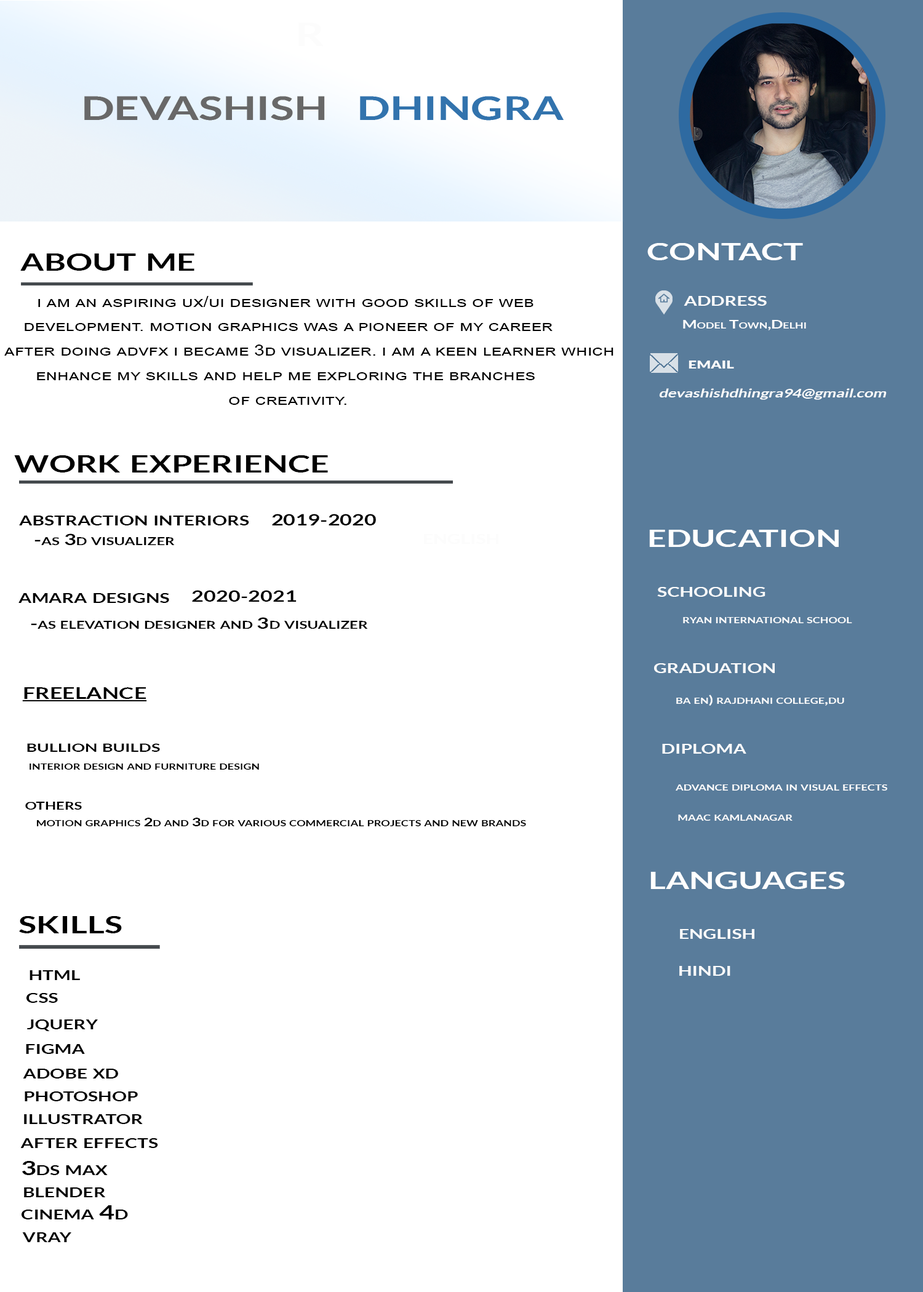
<style>
.page{position:relative;width:923px;height:1292px;background:#ffffff}
.page>*{position:absolute;margin:0}
.t1{font:34.1px "Lato-Bold";color:#ffffff;font-variant:small-caps;scale:1.39 1}
.t2{font:34.1px "Lato-Bold";color:#000000;font-variant:small-caps;scale:1.39 1}
.t3{font:19px "Lato-Bold";color:#fcfcfc;font-variant:small-caps;scale:1.39 1}
.t4{font:11.4px "Lato-Bold";color:#fcfcfc;font-variant:small-caps;scale:1.39 1}
.t5{font:15.2px "Lato-Black";color:#fcfcfc;font-variant:small-caps;scale:1.39 1}
.t6{font:11.4px "Lato-Bold";color:#fcfcfc;font-style:italic;scale:1.39 1}
.t7{font:19px "Lato-Bold";color:#000000;font-variant:small-caps;scale:1.39 1}
.t8{font:15.2px "Lato-Bold";color:#000000;font-variant:small-caps;scale:1.39 1}
.t9{font:22.8px "Lato-Bold";color:#000000;font-variant:small-caps;text-decoration:underline;scale:1.39 1}
.t10{font:17.1px "Lato-Bold";color:#000000;font-variant:small-caps;scale:1.39 1}
.t11{font:11.4px "Lato-Bold";color:#000000;font-variant:small-caps;scale:1.39 1}
</style>
<div class="page">
<p class="t1" style="left:647px;top:243px;width:156px;height:17px">contact</p>
<p class="t2" style="left:20px;top:253px;width:174px;height:18px">about me</p>
<p class="t3" style="left:684px;top:296px;width:83px;height:10px">address</p>
<p class="t4" style="left:683px;top:320px;width:123px;height:10px">Model Town,Delhi</p>
<p class="t5" style="left:688px;top:361px;width:46px;height:8px">email</p>
<p class="t6" style="left:659px;top:388px;width:228px;height:12px">devashishdhingra94@gmail.com</p>
<p class="t2" style="left:14px;top:455px;width:314px;height:18px">work experience</p>
<p class="t7" style="left:19px;top:516px;width:230px;height:9px">abstraction interiors</p>
<p class="t8" style="left:272px;top:514px;width:104px;height:11px">2019-2020</p>
<p class="t8" style="left:34px;top:533px;width:141px;height:12px">-as 3d visualizer</p>
<p class="t1" style="left:649px;top:530px;width:190px;height:17px">education</p>
<p class="t7" style="left:18px;top:593px;width:151px;height:10px">amara designs</p>
<p class="t8" style="left:192px;top:590px;width:105px;height:12px">2020-2021</p>
<p class="t3" style="left:657px;top:587px;width:108px;height:10px">schooling</p>
<p class="t8" style="left:31px;top:617px;width:337px;height:12px">-as elevation designer and 3d visualizer</p>
<p class="t4" style="left:683px;top:617px;width:169px;height:6px">ryan international school</p>
<p class="t3" style="left:654px;top:663px;width:121px;height:10px">graduation</p>
<p class="t9" style="left:22px;top:687px;width:125px;height:14px">freelance</p>
<p class="t4" style="left:676px;top:695px;width:168px;height:11px">ba en) rajdhani college,du</p>
<p class="t10" style="left:27px;top:743px;width:133px;height:9px">bullion builds</p>
<p class="t3" style="left:662px;top:744px;width:84px;height:10px">diploma</p>
<p class="t11" style="left:30px;top:764px;width:229px;height:6px">interior design and furniture design</p>
<p class="t4" style="left:676px;top:784px;width:211px;height:7px">advance diploma in visual effects</p>
<p class="t8" style="left:25px;top:802px;width:57px;height:8px">others</p>
<p class="t11" style="left:37px;top:818px;width:489px;height:8px">motion graphics 2d and 3d for various commercial projects and new brands</p>
<p class="t4" style="left:678px;top:815px;width:114px;height:6px">maac kamlanagar</p>
<p class="t1" style="left:650px;top:872px;width:195px;height:17px">languages</p>
<p class="t2" style="left:19px;top:916px;width:103px;height:17px">skills</p>
<p class="t3" style="left:680px;top:929px;width:74px;height:10px">english</p>
<p class="t3" style="left:679px;top:966px;width:51px;height:10px">hindi</p>
<p class="t7" style="left:30px;top:970px;width:50px;height:10px">html</p>
<p class="t7" style="left:26px;top:993px;width:32px;height:10px">css</p>
<p class="t7" style="left:27px;top:1019px;width:71px;height:12px">jquery</p>
<p class="t7" style="left:26px;top:1044px;width:59px;height:10px">figma</p>
<p class="t7" style="left:23px;top:1069px;width:95px;height:10px">adobe xd</p>
<p class="t7" style="left:25px;top:1091px;width:113px;height:10px">photoshop</p>
<p class="t7" style="left:24px;top:1114px;width:119px;height:10px">illustrator</p>
<p class="t7" style="left:20px;top:1138px;width:138px;height:10px">after effects</p>
<p class="t7" style="left:22px;top:1161px;width:86px;height:14px">3ds max</p>
<p class="t7" style="left:24px;top:1187px;width:81px;height:10px">blender</p>
<p class="t7" style="left:22px;top:1205px;width:106px;height:14px">cinema 4d</p>
<p class="t7" style="left:22px;top:1232px;width:49px;height:10px">vray</p>
</div>
